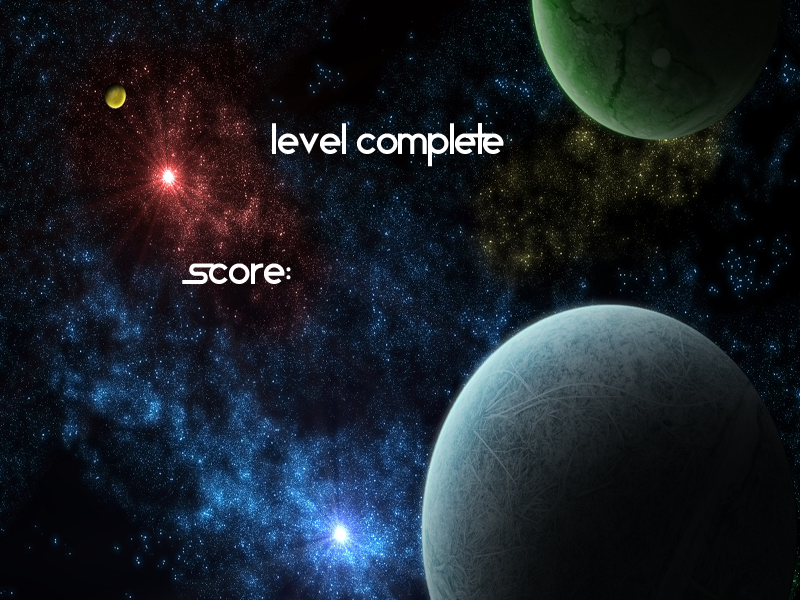
<style>
.page{position:relative;width:800px;height:600px}
.page>*{position:absolute;margin:0}
.t1{font:36px "StarAvenue";letter-spacing:-0.02em;color:#ffffff}
</style>
<div class="page">
<p class="t1" style="left:182px;top:123px;width:322px;height:161px;text-align:center">LEVEL COMPLETE<br><br><br>Score:</p>
</div>
